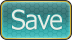
<style>
.page{position:relative;width:72px;height:40px}
.page>*{position:absolute;margin:0}
.t1{font:26px "Meiryo";letter-spacing:-0.04em;color:#e7eee6;scale:0.9 1}
</style>
<div class="page">
<p class="t1" style="left:12px;top:9px;width:50px;height:21px">Save</p>
</div>
